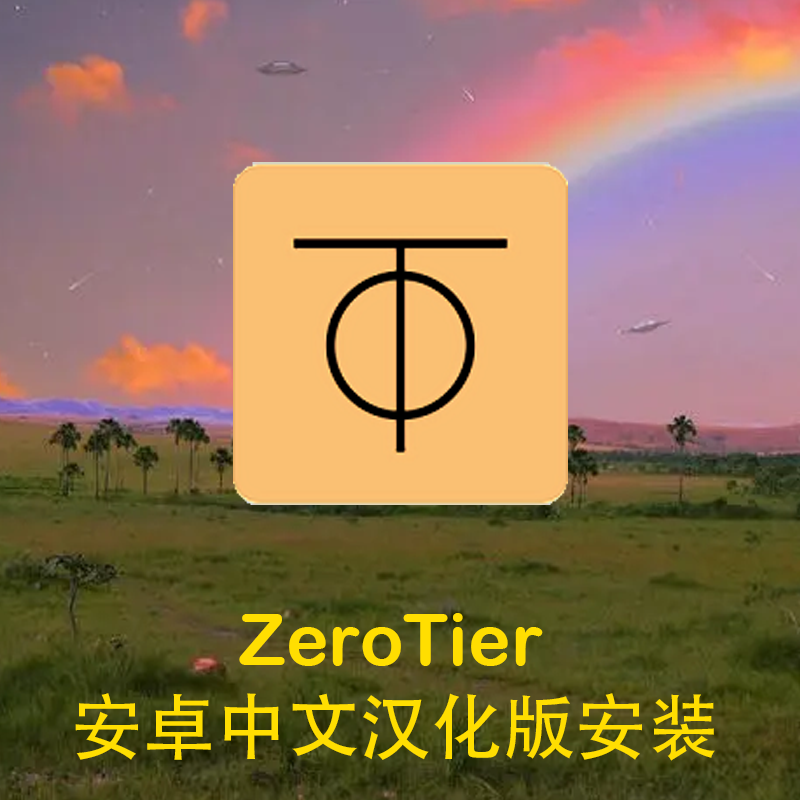
<style>
.page{position:relative;width:800px;height:800px}
.page>*{position:absolute;margin:0}
.t1{font:72px "ArialRoundedMTBold";color:#ffde01}
.t2{font:72px "AdobeHeitiStd-Regular";color:#ffde01}
</style>
<div class="page">
<p class="t1" style="left:239px;top:613px;width:304px;height:53px">ZeroTier</p>
<p class="t2" style="left:75px;top:693px;width:640px;height:68px">安卓中文汉化版安装</p>
</div>
